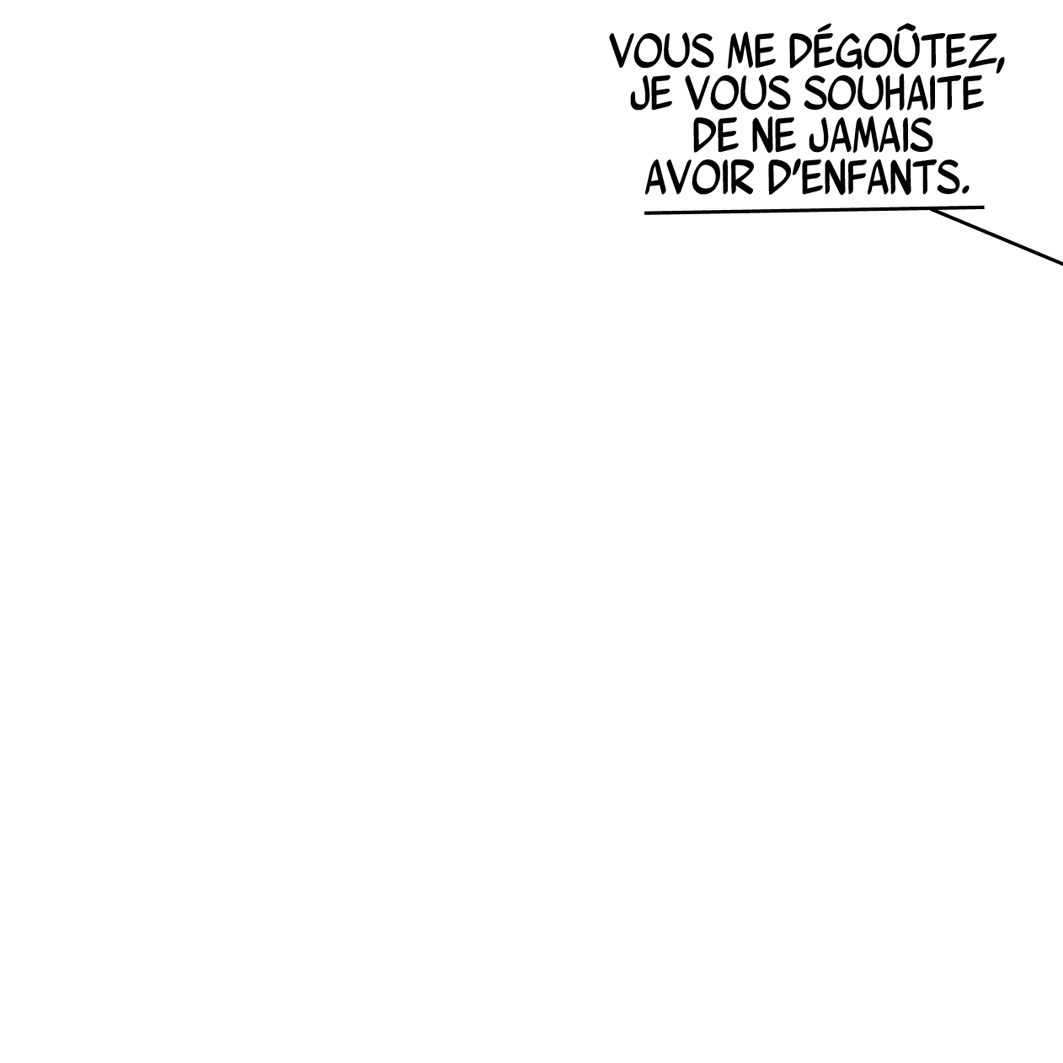
<style>
.page{position:relative;width:1063px;height:1063px;background:#ffffff}
.page>*{position:absolute;margin:0}
.t1{font:49.1px/42.1px "WurmicsBravo";color:#000000}
</style>
<div class="page">
<p class="t1" style="left:609px;top:23px;width:396px;height:172px;text-align:center">vous me dégoûtez,<br>je vous souhaite<br> de ne jamais<br>avoir d’enfants.</p>
</div>
